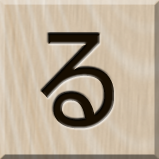
<style>
.page{position:relative;width:159px;height:159px}
.page>*{position:absolute;margin:0}
.t1{font:116px "MS-UIGothic";color:#180e01}
</style>
<div class="page">
<p class="t1" style="left:41px;top:33px;width:73px;height:96px">る</p>
</div>
